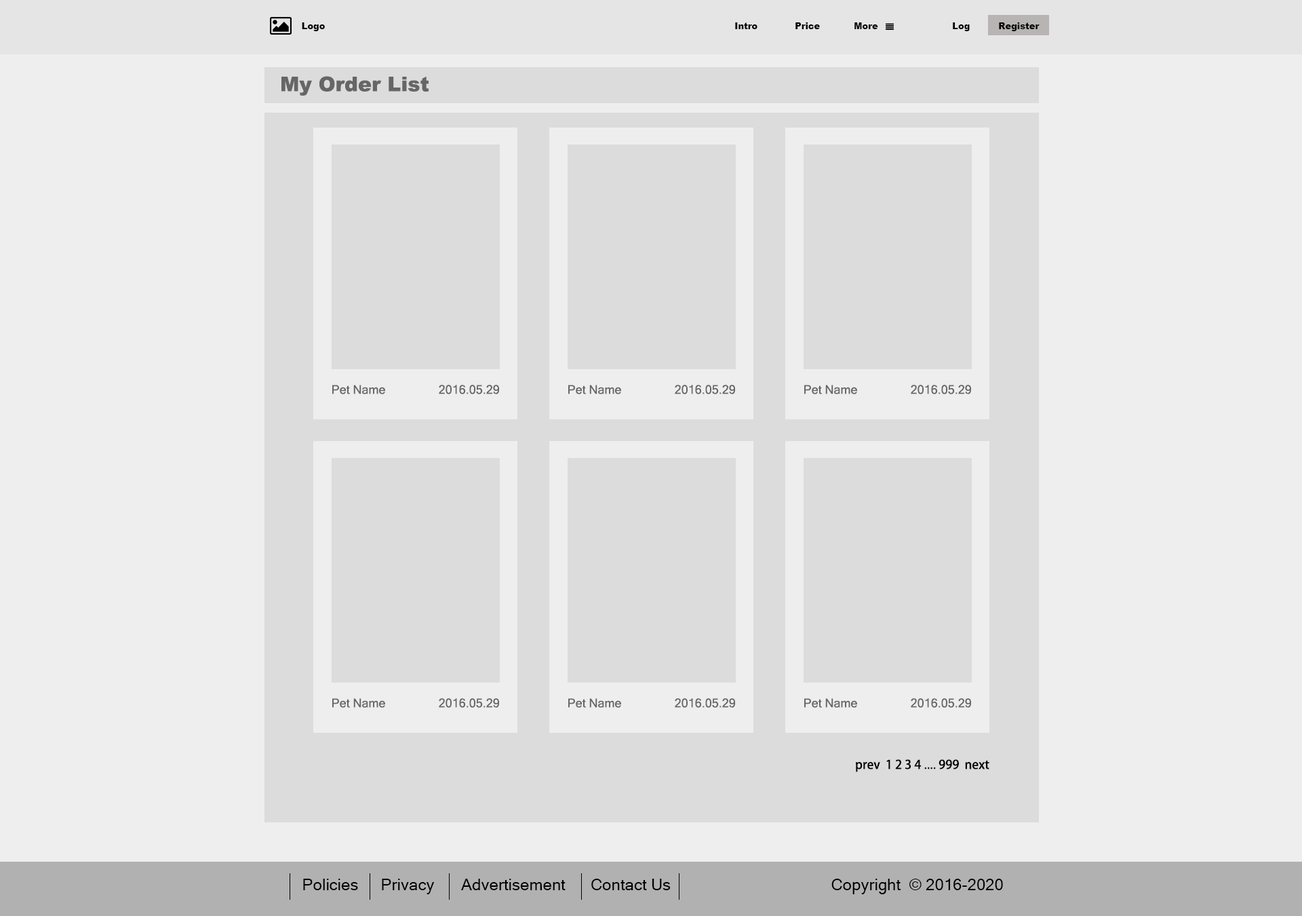
<style>
.page{position:relative;width:1302px;height:916px;background:#eeeeee}
.page>*{position:absolute;margin:0}
.t1{font:8.8px "Arial-Black";color:#050505}
.t2{font:20.3px "Arial-Black";color:#666666}
.t3{font:12.2px "MicrosoftSansSerif";color:#666666}
.t4{font:12.2px "AdobeHeitiStd-Regular";color:#000000}
.t5{font:16.3px "MicrosoftSansSerif";color:#000000}
</style>
<div class="page">
<p class="t1" style="left:302px;top:22px;width:23px;height:9px">Logo</p>
<p class="t1" style="left:735px;top:22px;width:23px;height:7px">Intro</p>
<p class="t1" style="left:796px;top:22px;width:24px;height:7px">Price</p>
<p class="t1" style="left:855px;top:22px;width:23px;height:7px">More</p>
<p class="t1" style="left:953px;top:22px;width:17px;height:9px">Log</p>
<p class="t1" style="left:999px;top:22px;width:41px;height:9px">Register</p>
<p class="t2" style="left:281px;top:76px;width:148px;height:20px">My Order List</p>
<p class="t3" style="left:332px;top:385px;width:53px;height:9px">Pet Name</p>
<p class="t3" style="left:439px;top:385px;width:60px;height:9px">2016.05.29</p>
<p class="t3" style="left:568px;top:385px;width:53px;height:9px">Pet Name</p>
<p class="t3" style="left:675px;top:385px;width:60px;height:9px">2016.05.29</p>
<p class="t3" style="left:804px;top:385px;width:53px;height:9px">Pet Name</p>
<p class="t3" style="left:911px;top:385px;width:60px;height:9px">2016.05.29</p>
<p class="t3" style="left:332px;top:698px;width:53px;height:9px">Pet Name</p>
<p class="t3" style="left:439px;top:698px;width:60px;height:9px">2016.05.29</p>
<p class="t3" style="left:568px;top:698px;width:53px;height:9px">Pet Name</p>
<p class="t3" style="left:675px;top:698px;width:60px;height:9px">2016.05.29</p>
<p class="t3" style="left:804px;top:698px;width:53px;height:9px">Pet Name</p>
<p class="t3" style="left:911px;top:698px;width:60px;height:9px">2016.05.29</p>
<p class="t4" style="left:856px;top:759px;width:134px;height:13px">prev  1 2 3 4 .... 999  next</p>
<p class="t5" style="left:303px;top:878px;width:55px;height:12px">Policies</p>
<p class="t5" style="left:382px;top:878px;width:53px;height:16px">Privacy</p>
<p class="t5" style="left:461px;top:878px;width:105px;height:12px">Advertisement</p>
<p class="t5" style="left:591px;top:878px;width:80px;height:12px">Contact Us</p>
<p class="t5" style="left:832px;top:878px;width:171px;height:16px">Copyright  © 2016-2020</p>
</div>
